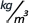
<style>
.page{position:relative;width:29px;height:23px;background:#ffffff}
.page>*{position:absolute;margin:0}
.t1{font:12.7px "Calibri-Italic";letter-spacing:-0.05em;color:#151f28;scale:1.09 1}
.t2{font:12.7px "Calibri-Italic";letter-spacing:-0.05em;color:#000000;scale:1.09 1}
.t3{font:8.7px "Calibri-Italic";letter-spacing:-0.05em;color:#000000;scale:1.09 1}
</style>
<div class="page">
<p class="t1" style="left:0px;top:0px;width:13px;height:12px">kg</p>
<p class="t2" style="left:14px;top:16px;width:11px;height:8px">m</p>
<p class="t3" style="left:23px;top:10px;width:6px;height:7px">3</p>
</div>
